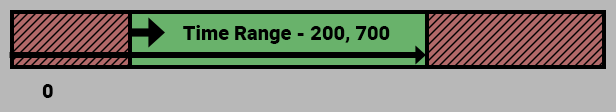
<style>
.page{position:relative;width:616px;height:112px;background:#b8b8b8}
.page>*{position:absolute;margin:0}
.t1{font:20px "Roboto-Black";color:#000000}
</style>
<div class="page">
<p class="t1" style="left:183px;top:25px;width:207px;height:19px">Time Range - 200, 700</p>
<p class="t1" style="left:42px;top:84px;width:11px;height:14px">0</p>
</div>
